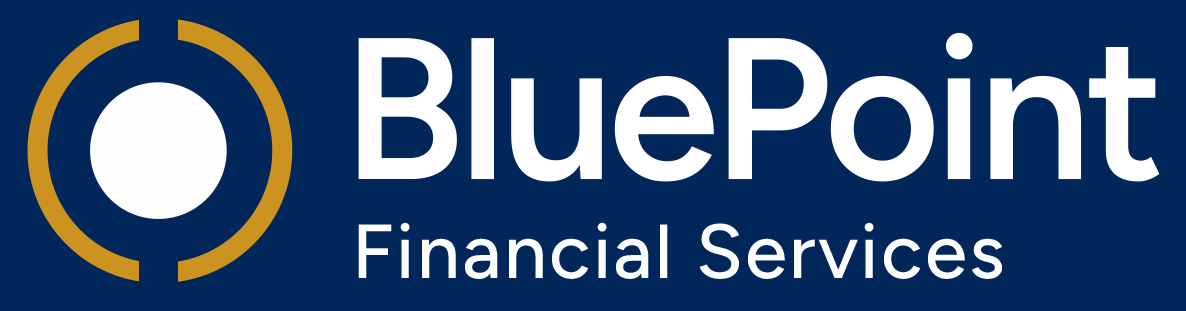
<style>
.page{position:relative;width:1186px;height:311px;background:#01265a}
.page>*{position:absolute;margin:0}
.t1{font:201.2px "Figtree-SemiBold";letter-spacing:-0.03em;color:#ffffff}
.t2{font:76.5px "Figtree-Medium";letter-spacing:0.03em;color:#ffffff}
</style>
<div class="page">
<p class="t1" style="left:358px;top:32px;width:802px;height:150px">BluePoint</p>
<p class="t2" style="left:358px;top:222px;width:644px;height:57px">Financial Services</p>
</div>
